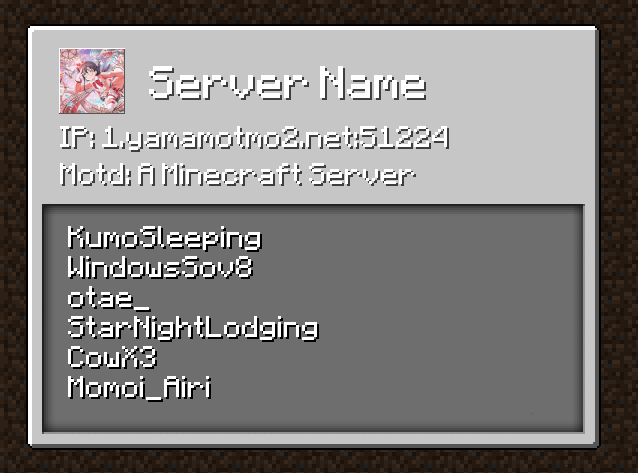
<style>
.page{position:relative;width:638px;height:473px;background:#6e6e6e}
.page>*{position:absolute;margin:0}
.t1{font:36px "MinecraftAE-Pixel";color:#ffffff}
.t2{font:24px "MinecraftAE-Pixel";color:#ffffff}
.t3{font:24px "MinecraftAE-Pixel";color:#3e3e3e}
</style>
<div class="page">
<p class="t1" style="left:149px;top:66px;width:275px;height:32px">Server Name</p>
<p class="t2" style="left:60px;top:126px;width:387px;height:24px">IP: 1.yamamotmo2.net:51224</p>
<p class="t3" style="left:62px;top:128px;width:387px;height:24px">IP: 1.yamamotmo2.net:51224</p>
<p class="t2" style="left:60px;top:163px;width:354px;height:21px">Motd: A Minecraft Server</p>
<p class="t3" style="left:62px;top:165px;width:354px;height:21px">Motd: A Minecraft Server</p>
<p class="t2" style="left:68px;top:226px;width:192px;height:24px">KumoSleeping</p>
<p class="t2" style="left:68px;top:256px;width:183px;height:21px">WindowsSov8</p>
<p class="t2" style="left:68px;top:286px;width:81px;height:24px">otae_</p>
<p class="t2" style="left:68px;top:316px;width:249px;height:24px">StarNightLodging</p>
<p class="t2" style="left:68px;top:346px;width:87px;height:21px">CowX3</p>
<p class="t2" style="left:68px;top:376px;width:141px;height:24px">Momoi_Airi</p>
</div>
